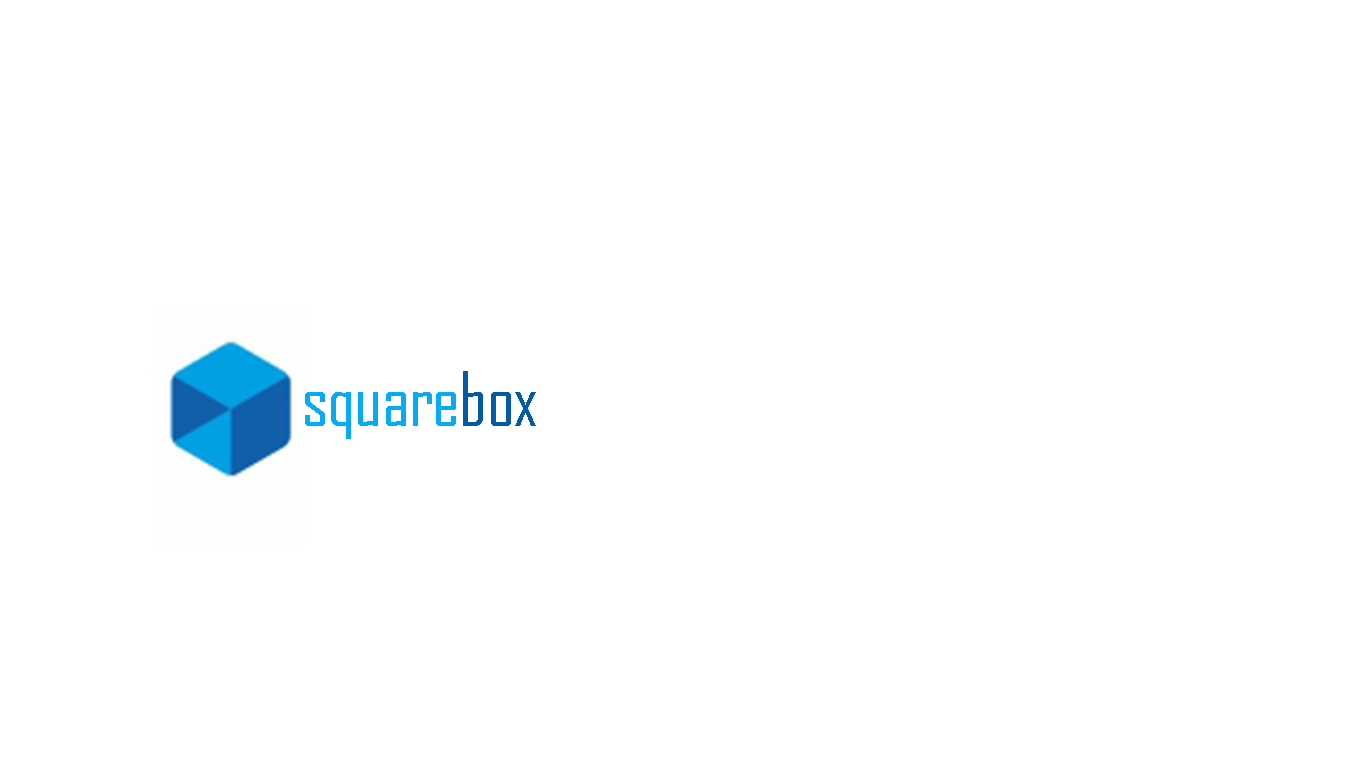
<style>
.page{position:relative;width:1366px;height:768px;background:#ffffff}
.page>*{position:absolute;margin:0}
.t1{font:72px "AgencyFB-Reg";color:#06abf5}
.t2{font:72px "AgencyFB-Reg";color:#055aa8}
</style>
<div class="page">
<p class="t1" style="left:305px;top:371px;width:231px;height:68px">square<span class="t2">box</span></p>
</div>
